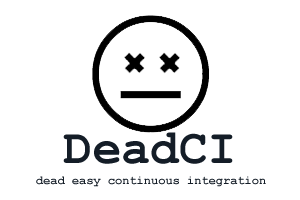
<style>
.page{position:relative;width:300px;height:200px;background:#ffffff}
.page>*{position:absolute;margin:0}
.t1{font:48px "CourierNewPS-BoldMT";color:#141d27}
.t2{font:12px "CourierNewPS-BoldMT";color:#141d27}
</style>
<div class="page">
<p class="t1" style="left:63px;top:132px;width:170px;height:32px">DeadCI</p>
<p class="t2" style="left:36px;top:176px;width:230px;height:11px">dead easy continuous integration</p>
</div>
